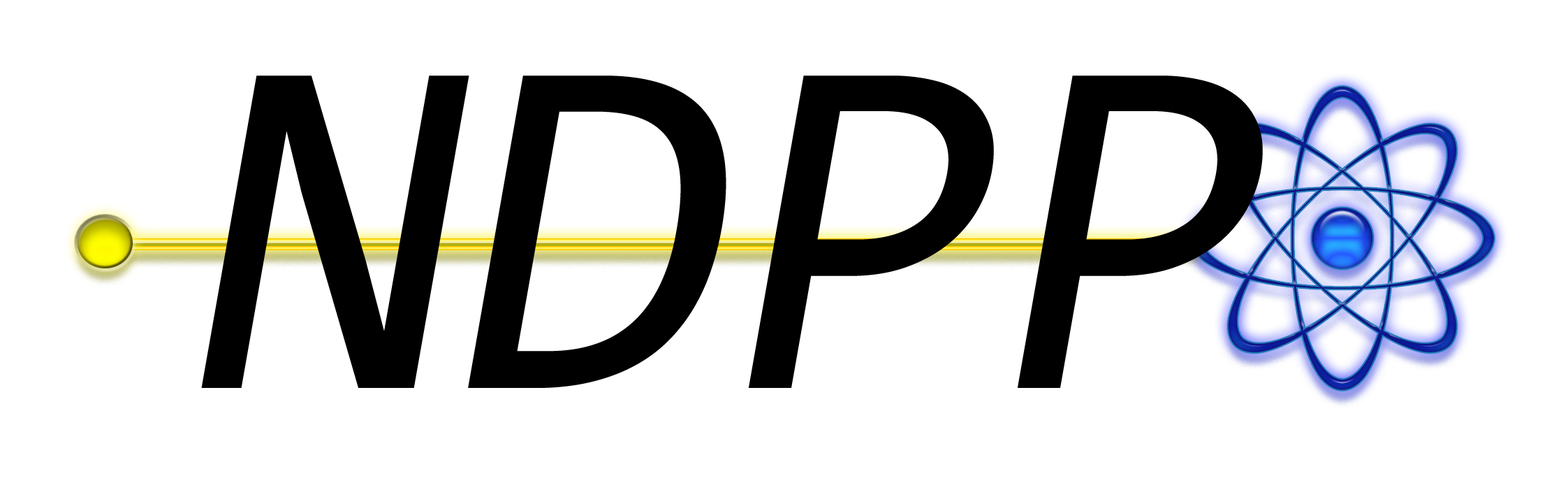
<style>
.page{position:relative;width:1568px;height:483px;background:#ffffff}
.page>*{position:absolute;margin:0}
.t1{font:488.9px "Consolas";color:#000000;font-style:italic}
</style>
<div class="page">
<p class="t1" style="left:201px;top:75px;width:1062px;height:313px">NDPP</p>
</div>
